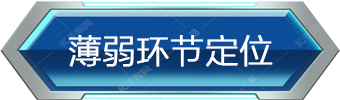
<style>
.page{position:relative;width:340px;height:100px}
.page>*{position:absolute;margin:0}
.t1{font:33.3px "MicrosoftYaHeiLight";color:#ffffff;font-weight:bold}
</style>
<div class="page">
<p class="t1" style="left:68px;top:35px;width:205px;height:32px">薄弱环节定位</p>
</div>
